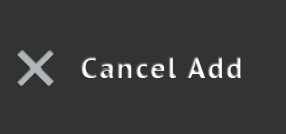
<style>
.page{position:relative;width:286px;height:134px;background:#333333}
.page>*{position:absolute;margin:0}
.t1{font:31px "PTSans-Bold";letter-spacing:0.06em}
</style>
<div class="page">
<p class="t1" style="left:81px;top:56px;width:160px;height:22px">Cancel Add</p>
</div>
